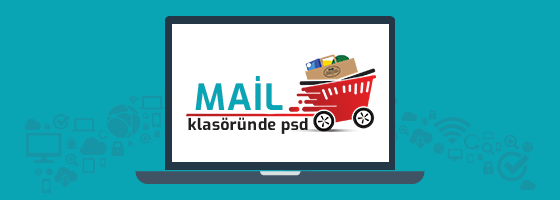
<style>
.page{position:relative;width:560px;height:200px;background:#0aa5b5}
.page>*{position:absolute;margin:0}
.t1{font:36px "Exo-Bold";letter-spacing:0.025em;color:#0aa5b5}
.t2{font:16px "Exo-Bold";letter-spacing:0.025em;color:#231f20}
</style>
<div class="page">
<p class="t1" style="left:195px;top:76px;width:88px;height:34px">MAİL</p>
<p class="t2" style="left:188px;top:117px;width:120px;height:17px">klasöründe psd</p>
</div>
